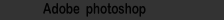
<style>
.page{position:relative;width:224px;height:20px;background:#333333}
.page>*{position:absolute;margin:0}
.t1{font:14.9px "ArialRoundedMTBold";color:#030303;scale:0.78 1}
</style>
<div class="page">
<p class="t1" style="left:43px;top:3px;width:103px;height:14px">Adobe  photoshop</p>
</div>
